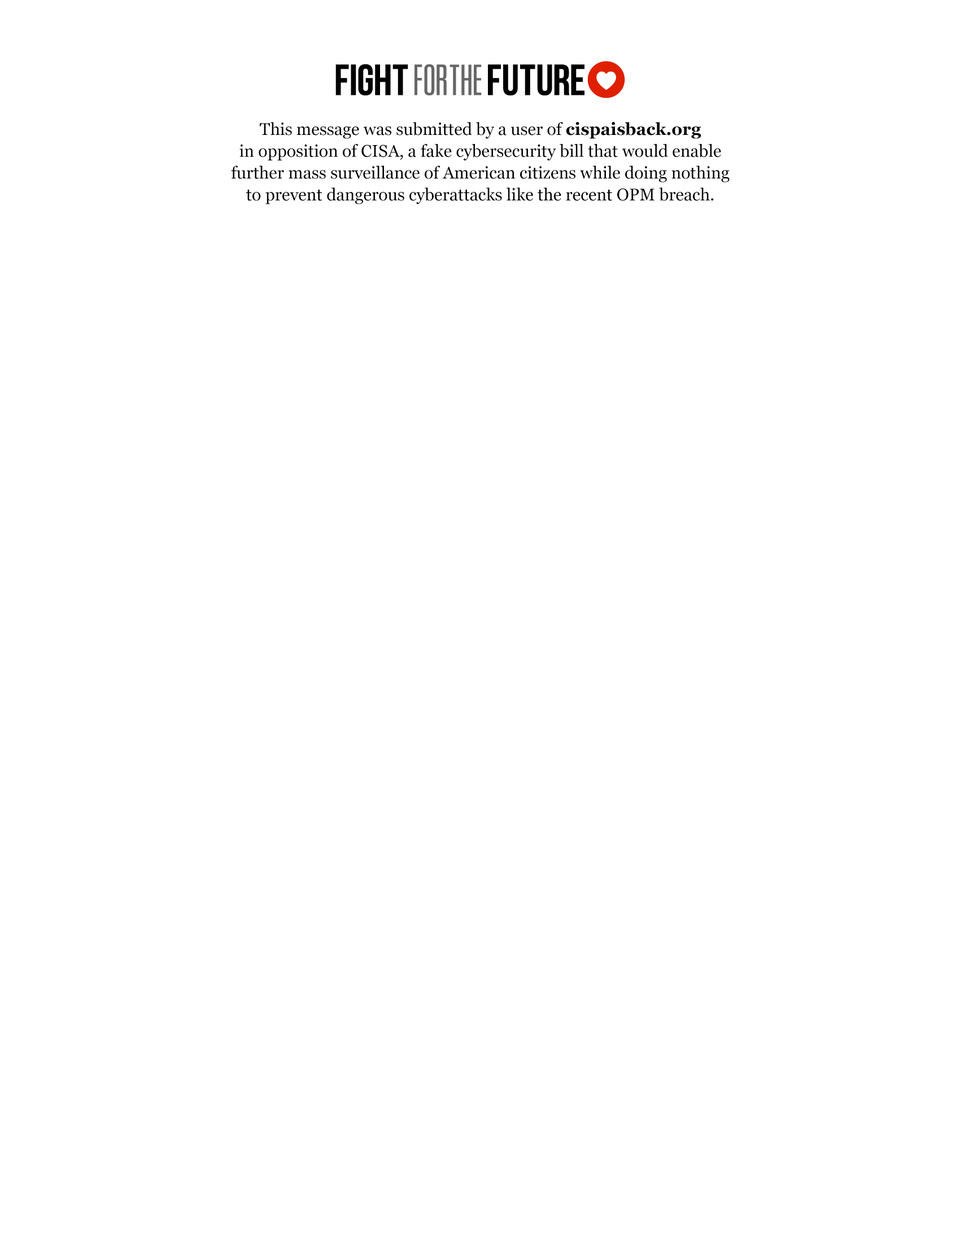
<style>
.page{position:relative;width:960px;height:1242px;background:#ffffff}
.page>*{position:absolute;margin:0}
.t1{font:16.9px/21.9px "Georgia";color:#000000}
.t2{font:16.9px/21.9px "Georgia-Bold";color:#000000}
</style>
<div class="page">
<p class="t1" style="left:231px;top:122px;width:499px;height:82px;text-align:center">This message was submitted by a user of <span class="t2">cispaisback.org<br></span>in opposition of CISA, a fake cybersecurity bill that would enable<br>further mass surveillance of American citizens while doing nothing<br>to prevent dangerous cyberattacks like the recent OPM breach.</p>
</div>
